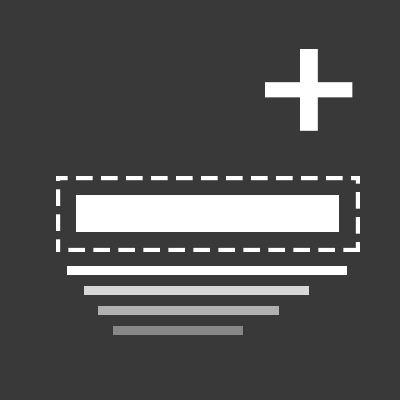
<style>
.page{position:relative;width:400px;height:400px;background:#393939}
.page>*{position:absolute;margin:0}
.t1{font:245.8px "Metrophobic";color:#ffffff}
</style>
<div class="page">
<p class="t1" style="left:265px;top:49px;width:88px;height:82px">+</p>
</div>
